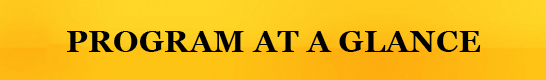
<style>
.page{position:relative;width:546px;height:80px}
.page>*{position:absolute;margin:0}
.t1{font:31.5px "Georgia-Bold";color:#000000}
</style>
<div class="page">
<p class="t1" style="left:67px;top:31px;width:414px;height:21px">PROGRAM AT A GLANCE</p>
</div>
